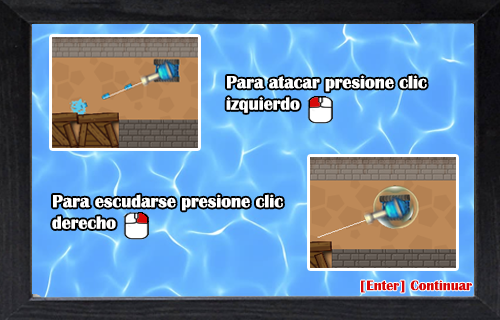
<style>
.page{position:relative;width:500px;height:320px}
.page>*{position:absolute;margin:0}
.t1{font:17.9px "BritannicBold";color:#ffffff}
.t2{font:14px "BritannicBold";color:#d60808}
</style>
<div class="page">
<p class="t1" style="left:226px;top:75px;width:201px;height:38px">Para atacar presione clic izquierdo</p>
<p class="t1" style="left:52px;top:194px;width:231px;height:35px">Para escudarse presione clic derecho</p>
<p class="t2" style="left:361px;top:280px;width:111px;height:13px">[Enter] Continuar</p>
</div>
